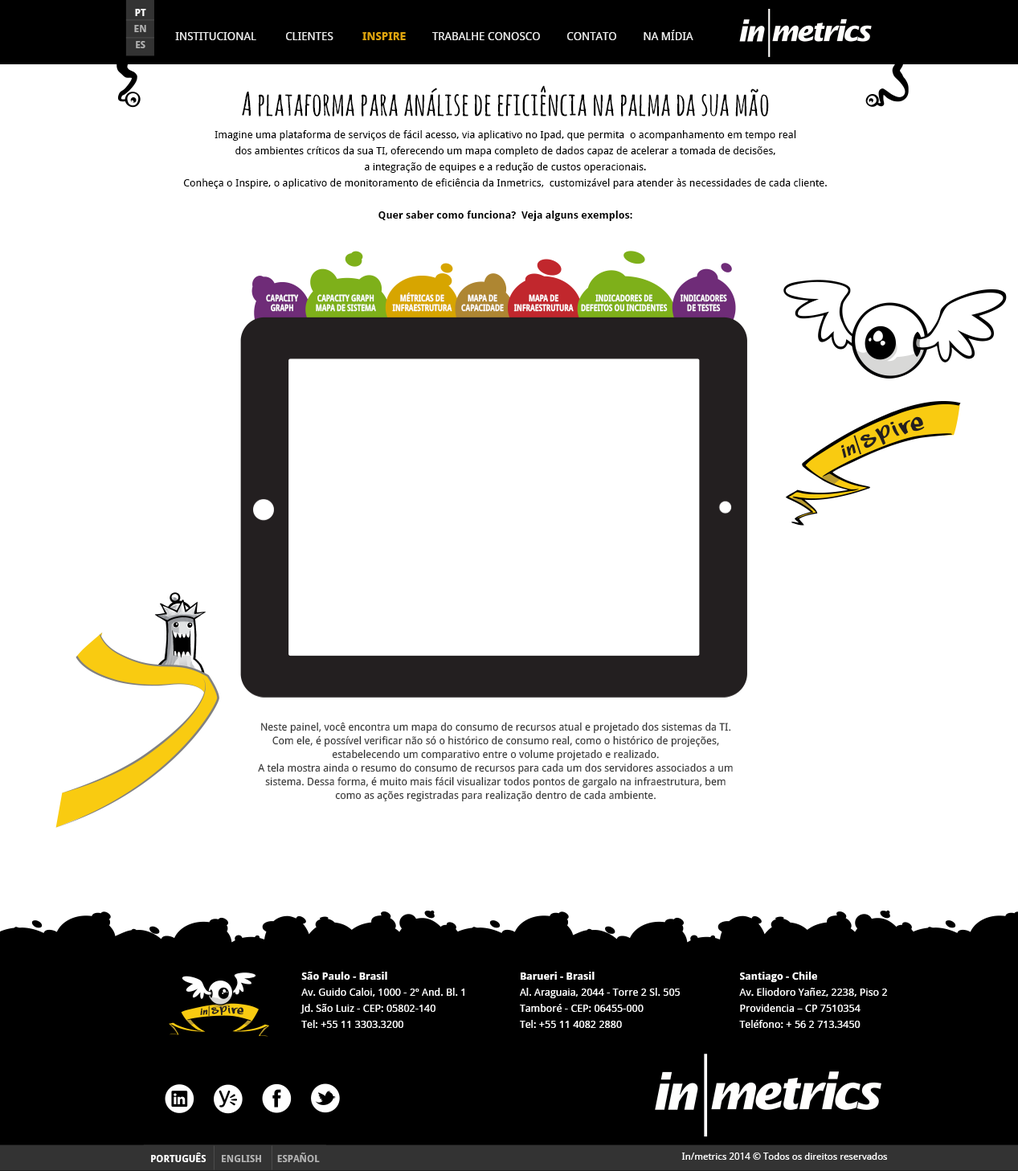
<style>
.page{position:relative;width:1018px;height:1171px;background:#ffffff}
.page>*{position:absolute;margin:0}
.t1{font:9.6px/16.1px "DroidSans-Bold";color:#b3b3b3}
.t2{font:9.6px/16.1px "DroidSans-Bold";color:#ffffff}
.t3{font:11.3px "DroidSans";color:#ffffff}
.t4{font:11.3px "DroidSans-Bold";color:#eeb111}
.t5{font:32.1px "AmaticSC-Bold";color:#000000}
.t6{font:10.4px/16.1px "DroidSans";color:#000000}
.t7{font:10.4px/16.1px "DroidSans-Bold";color:#000000}
.t8{font:9.2px/9.6px "DroidSans-Bold";color:#ffffff;scale:0.75 1}
.t9{font:10.4px/13.7px "DroidSans";color:#333333}
.t10{font:10.4px/16.1px "DroidSans";color:#ffffff}
.t11{font:10.4px/16.1px "DroidSans-Bold";color:#ffffff}
.t12{font:9.6px "DroidSans-Bold";color:#b3b3b3}
.t13{font:9.6px "DroidSans-Bold";color:#ffffff}
.t14{font:9.6px "DroidSans";color:#ffffff}
</style>
<div class="page">
<p class="t1" style="left:134px;top:9px;width:12px;height:39px;text-align:center"><span class="t2">PT   </span>EN   ES</p>
<p class="t3" style="left:175px;top:30px;width:519px;height:10px;opacity:0.9">INSTITUCIONAL          CLIENTES          <span class="t4">INSPIRE</span>         TRABALHE CONOSCO         CONTATO         NA MÍDIA</p>
<p class="t5" style="left:242px;top:85px;width:527px;height:32px">A plataforma para análise de eficiência na palma da sua mão</p>
<p class="t6" style="left:183px;top:130px;width:644px;height:91px;text-align:center">Imagine uma plataforma de serviços de fácil acesso, via aplicativo no Ipad, que permita  o acompanhamento em tempo real <br>dos ambientes críticos da sua TI, oferecendo um mapa completo de dados capaz de acelerar a tomada de decisões, <br>a integração de equipes e a redução de custos operacionais. <br>Conheça o Inspire, o aplicativo de monitoramento de eficiência da Inmetrics,  customizável para atender às necessidades de cada cliente.<br><br><span class="t7">Quer saber como funciona?  Veja alguns exemplos:</span></p>
<p class="t8" style="left:392px;top:293px;width:60px;height:19px;text-align:center">MÉTRICAS DE INFRAESTRUTURA</p>
<p class="t8" style="left:266px;top:294px;width:33px;height:18px;text-align:center">CAPACITY GRAPH</p>
<p class="t8" style="left:316px;top:294px;width:60px;height:18px;text-align:center">CAPACITY GRAPH MAPA DE SISTEMA</p>
<p class="t8" style="left:461px;top:294px;width:43px;height:18px;text-align:center">MAPA DE CAPACIDADE</p>
<p class="t8" style="left:514px;top:294px;width:60px;height:18px;text-align:center">MAPA DE INFRAESTRUTURA</p>
<p class="t8" style="left:581px;top:294px;width:87px;height:18px;text-align:center">INDICADORES DE DEFEITOS OU INCIDENTES</p>
<p class="t8" style="left:680px;top:294px;width:47px;height:18px;text-align:center">INDICADORES DE TESTES</p>
<p class="t9" style="left:258px;top:722px;width:475px;height:80px;text-align:center">Neste painel, você encontra um mapa do consumo de recursos atual e projetado dos sistemas da TI.<br>Com ele, é possível verificar não só o histórico de consumo real, como o histórico de projeções, estabelecendo um comparativo entre o volume projetado e realizado. <br>A tela mostra ainda o resumo do consumo de recursos para cada um dos servidores associados a um sistema. Dessa forma, é muito mais fácil visualizar todos pontos de gargalo na infraestrutura, bem como as ações registradas para realização dentro de cada ambiente.</p>
<p class="t10" style="left:301px;top:972px;width:164px;height:56px"><span class="t11">São Paulo - Brasil<br></span>Av. Guido Caloi, 1000 - 2º And. Bl. 1<br>Jd. São Luiz - CEP: 05802-140<br>Tel: +55 11 3303.3200</p>
<p class="t10" style="left:520px;top:972px;width:160px;height:56px"><span class="t11">Barueri - Brasil<br></span>Al. Araguaia, 2044 - Torre 2 Sl. 505<br>Tamboré - CEP: 06455-000<br>Tel: +55 11 4082 2880</p>
<p class="t10" style="left:739px;top:972px;width:148px;height:56px"><span class="t11">Santiago - Chile<br></span>Av. Eliodoro Yañez, 2238, Piso 2<br>Providencia – CP 7510354<br>Teléfono: + 56 2 713.3450</p>
<p class="t12" style="left:151px;top:1153px;width:169px;height:9px"><span class="t13">PORTUGUÊS      </span>ENGLISH      ESPAÑOL</p>
<p class="t14" style="left:682px;top:1153px;width:205px;height:7px">In/metrics 2014 © Todos os direitos reservados</p>
</div>
